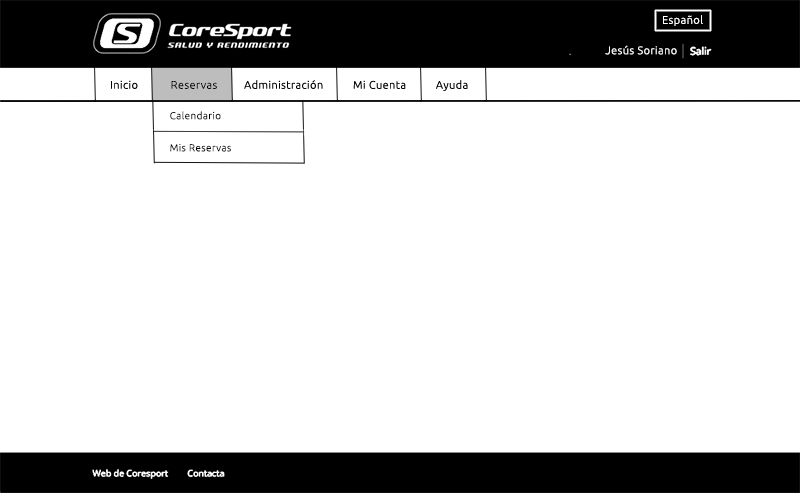
<style>
.page{position:relative;width:800px;height:493px;background:#ffffff}
.page>*{position:absolute;margin:0}
.t1{font:11px "Ubuntu-Light";letter-spacing:0.04em;color:#ffffff}
.t2{font:11px "Ubuntu-Light";letter-spacing:0.04em;color:#000000}
.t3{font:10px/16px "Ubuntu-Light";letter-spacing:0.04em;color:#000000}
.t4{font:10px/20px "Ubuntu-Light";letter-spacing:0.04em;color:#000000}
</style>
<div class="page">
<p class="t1" style="left:663px;top:15px;width:40px;height:11px">Español</p>
<p class="t1" style="left:605px;top:45px;width:72px;height:10px">Jesús Soriano</p>
<p class="t2" style="left:111px;top:80px;width:357px;height:11px">Inicio           Reservas         Administración          Mi Cuenta          Ayuda</p>
<p class="t3" style="left:170px;top:111px;width:61px;height:41px"><span class="t4">Calendario<br></span><br>Mis Reservas</p>
</div>
